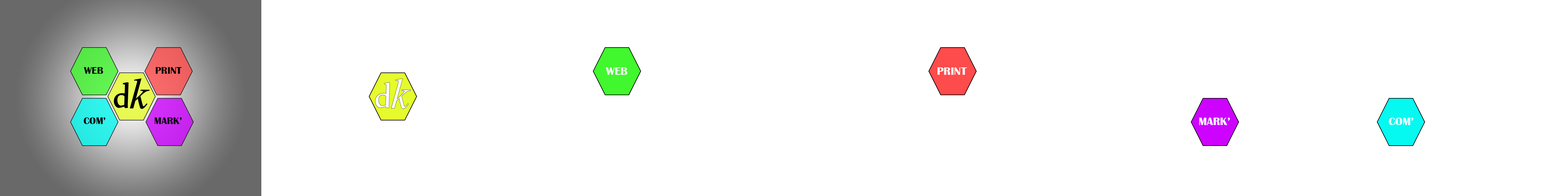
<style>
.page{position:relative;width:1568px;height:196px;background:#ffffff}
.page>*{position:absolute;margin:0}
.t1{font:9.9px "BritannicBold";color:#060709}
.t2{font:11.2px "BritannicBold";color:#fafbff}
</style>
<div class="page">
<p class="t1" style="left:84px;top:67px;width:19px;height:7px">WEB</p>
<p class="t1" style="left:156px;top:67px;width:26px;height:7px">PRINT</p>
<p class="t2" style="left:606px;top:67px;width:21px;height:8px">WEB</p>
<p class="t2" style="left:937px;top:67px;width:30px;height:8px">PRINT</p>
<p class="t1" style="left:84px;top:117px;width:21px;height:7px">COM’</p>
<p class="t1" style="left:155px;top:117px;width:27px;height:7px">MARK’</p>
<p class="t2" style="left:1199px;top:118px;width:31px;height:7px">MARK’</p>
<p class="t2" style="left:1389px;top:118px;width:24px;height:7px">COM’</p>
</div>
